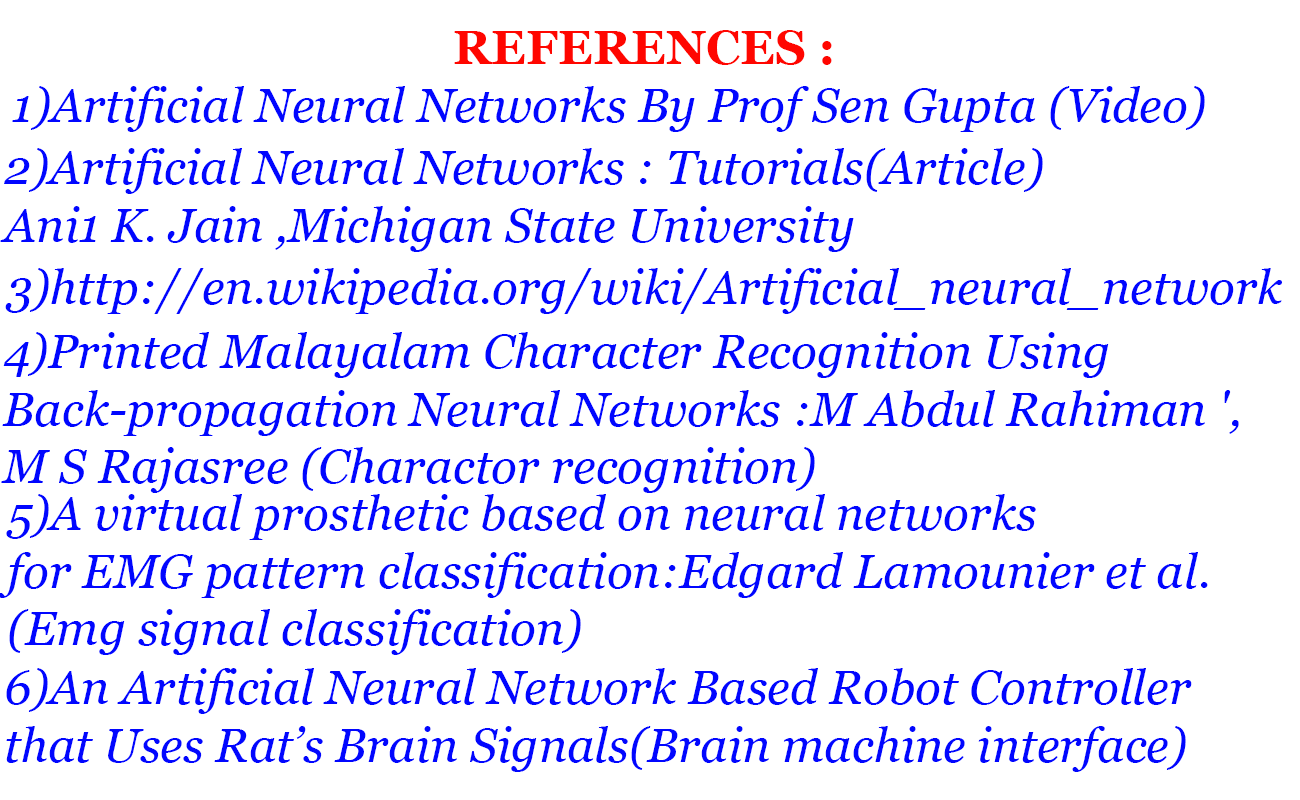
<style>
.page{position:relative;width:1300px;height:800px;background:#ffffff}
.page>*{position:absolute;margin:0}
.t1{font:48px "Georgia-Bold";color:#ff0600}
.t2{font:48px "Georgia-Italic";color:#0106ff}
.t3{font:48px "Georgia-Italic";color:#0006ff}
</style>
<div class="page">
<p class="t1" style="left:454px;top:30px;width:378px;height:35px">REFERENCES :</p>
<p class="t2" style="left:12px;top:86px;width:1193px;height:46px">1)Artificial Neural Networks By Prof Sen Gupta (Video)</p>
<p class="t2" style="left:0px;top:148px;width:1043px;height:104px">2)Artificial Neural Networks : Tutorials(Article)<br>Ani1 K. Jain ,Michigan State University</p>
<p class="t2" style="left:5px;top:268px;width:1277px;height:46px">3)http://en.wikipedia.org/wiki/Artificial_neural_network</p>
<p class="t3" style="left:1px;top:332px;width:1238px;height:161px">4)Printed Malayalam Character Recognition Using <br>Back-propagation Neural Networks :M Abdul Rahiman ',<br>M S Rajasree (Charactor recognition)</p>
<p class="t2" style="left:0px;top:494px;width:1208px;height:161px">5)A virtual prosthetic based on neural networks <br>for EMG pattern classification:Edgard Lamounier et al.<br>(Emg signal classification)</p>
<p class="t2" style="left:6px;top:668px;width:1186px;height:104px">6)An Artificial Neural Network Based Robot Controller <br>that Uses Rat’s Brain Signals(Brain machine interface)</p>
</div>
